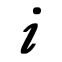
<style>
.page{position:relative;width:62px;height:62px;background:#ffffff}
.page>*{position:absolute;margin:0}
.t1{font:72px "Garamond-Italic";color:#000000;font-weight:bold}
</style>
<div class="page">
<p class="t1" style="left:20px;top:7px;width:21px;height:47px">i</p>
</div>
